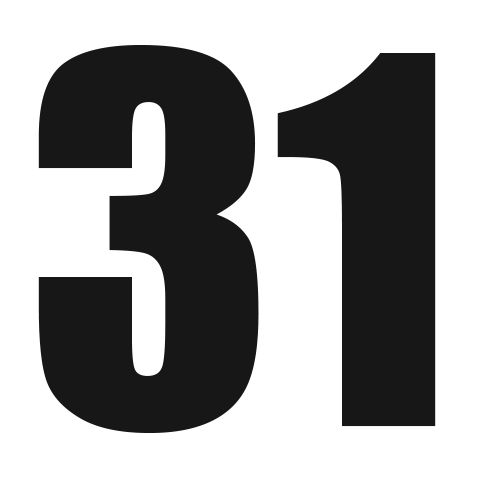
<style>
.page{position:relative;width:480px;height:480px;background:#ffffff}
.page>*{position:absolute;margin:0}
.t1{font:472.3px "Impact";color:#171717}
</style>
<div class="page">
<p class="t1" style="left:38px;top:45px;width:398px;height:388px">31</p>
</div>
